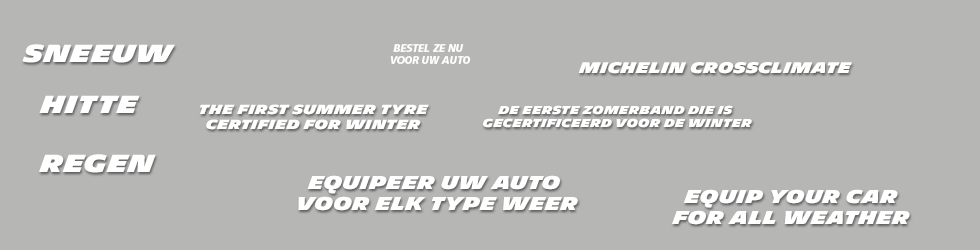
<style>
.page{position:relative;width:980px;height:250px;background:#b6b6b5}
.page>*{position:absolute;margin:0}
.t1{font:24px "Michelin-Black";letter-spacing:0.025em;color:#ffffff;text-transform:uppercase}
.t2{font:10.4px "FrutigerCE-BlackItalic";color:#ffffff;scale:0.96 1}
.t3{font:11px "Michelin-Black";letter-spacing:0.025em;color:#ffffff;text-transform:uppercase}
.t4{font:18px "Michelin-Black";letter-spacing:0.025em;color:#ffffff;text-transform:uppercase}
</style>
<div class="page">
<p class="t1" style="left:22px;top:44px;width:153px;height:19px">sneeuw</p>
<p class="t2" style="left:390px;top:44px;width:81px;height:20px;text-align:center">BESTEL ZE NU <br>VOOR UW AUTO</p>
<p class="t1" style="left:39px;top:95px;width:101px;height:18px">hitte</p>
<p class="t3" style="left:483px;top:105px;width:269px;height:23px;text-align:center">DE EERSTE ZOMERBAND DIE IS <br>GECERTIFICEERD VOOR DE WINTER</p>
<p class="t1" style="left:39px;top:154px;width:117px;height:19px">regen</p>
<p class="t4" style="left:298px;top:175px;width:280px;height:36px;text-align:center">EQUIPEER UW AUTO <br>VOOR ELK TYPE WEER</p>
</div>
